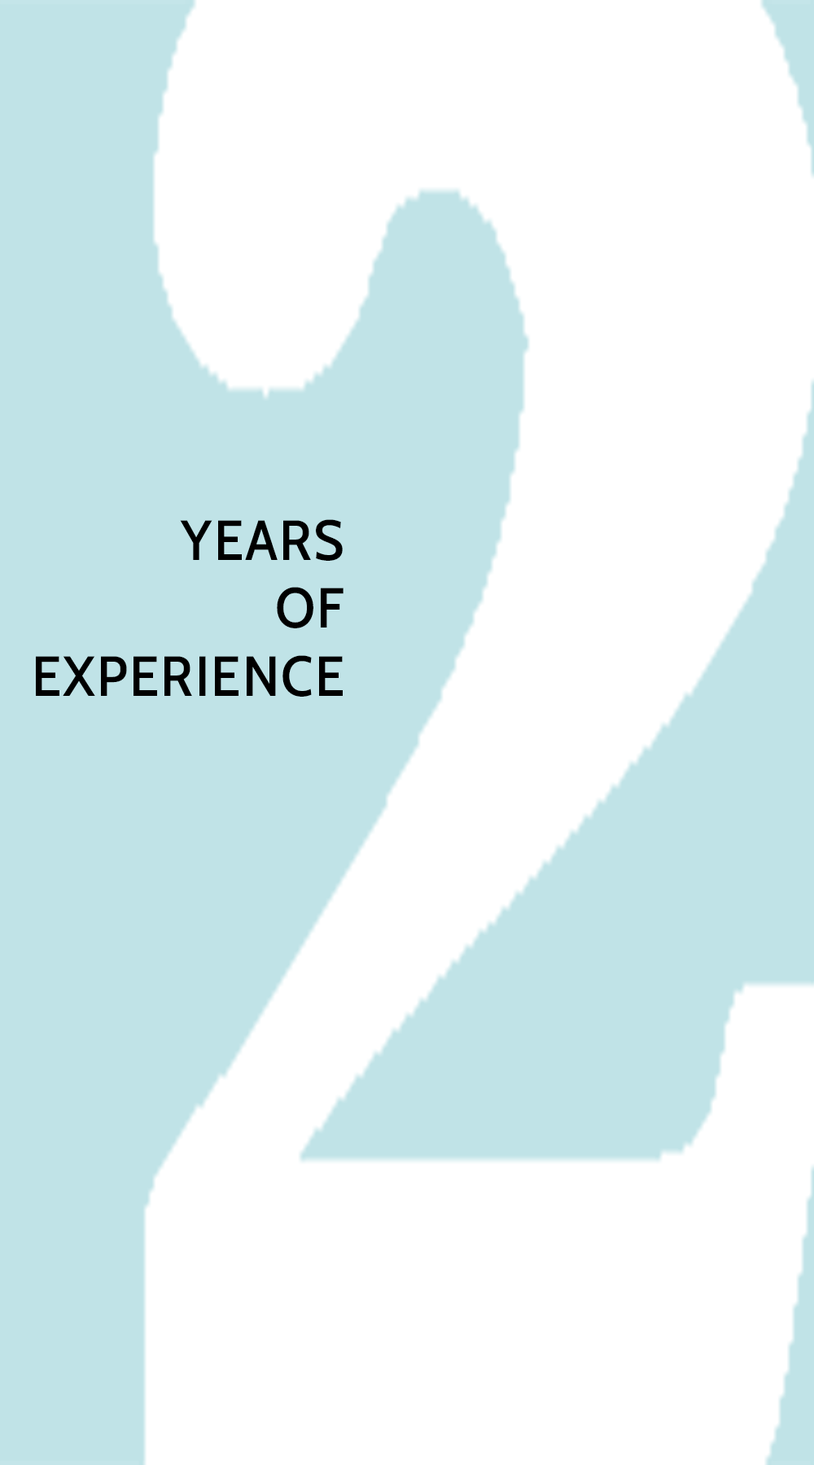
<style>
.page{position:relative;width:814px;height:1465px;background:#ffffff}
.page>*{position:absolute;margin:0}
.t1{font:56.5px "Cabin-SemiCondensedMedium";letter-spacing:0.03em;color:#000000}
</style>
<div class="page">
<p class="t1" style="left:36px;top:519px;width:307px;height:178px;text-align:right">YEARS<br>OF<br>EXPERIENCE</p>
</div>
